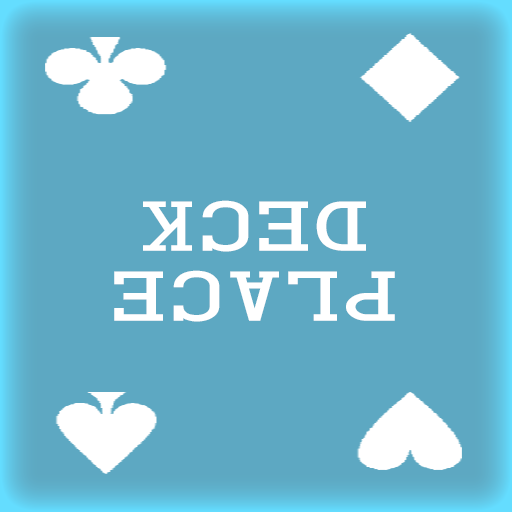
<style>
.page{position:relative;width:512px;height:512px;background:#5da8c2}
.page>*{position:absolute;margin:0}
.t1{font:58.7px "CardCharacters";color:#ffffff;scale:1.52 1}
</style>
<div class="page">
<p class="t1" style="left:114px;top:200px;width:281px;height:122px;text-align:center;rotate:180deg">Place<br>Deck</p>
</div>
